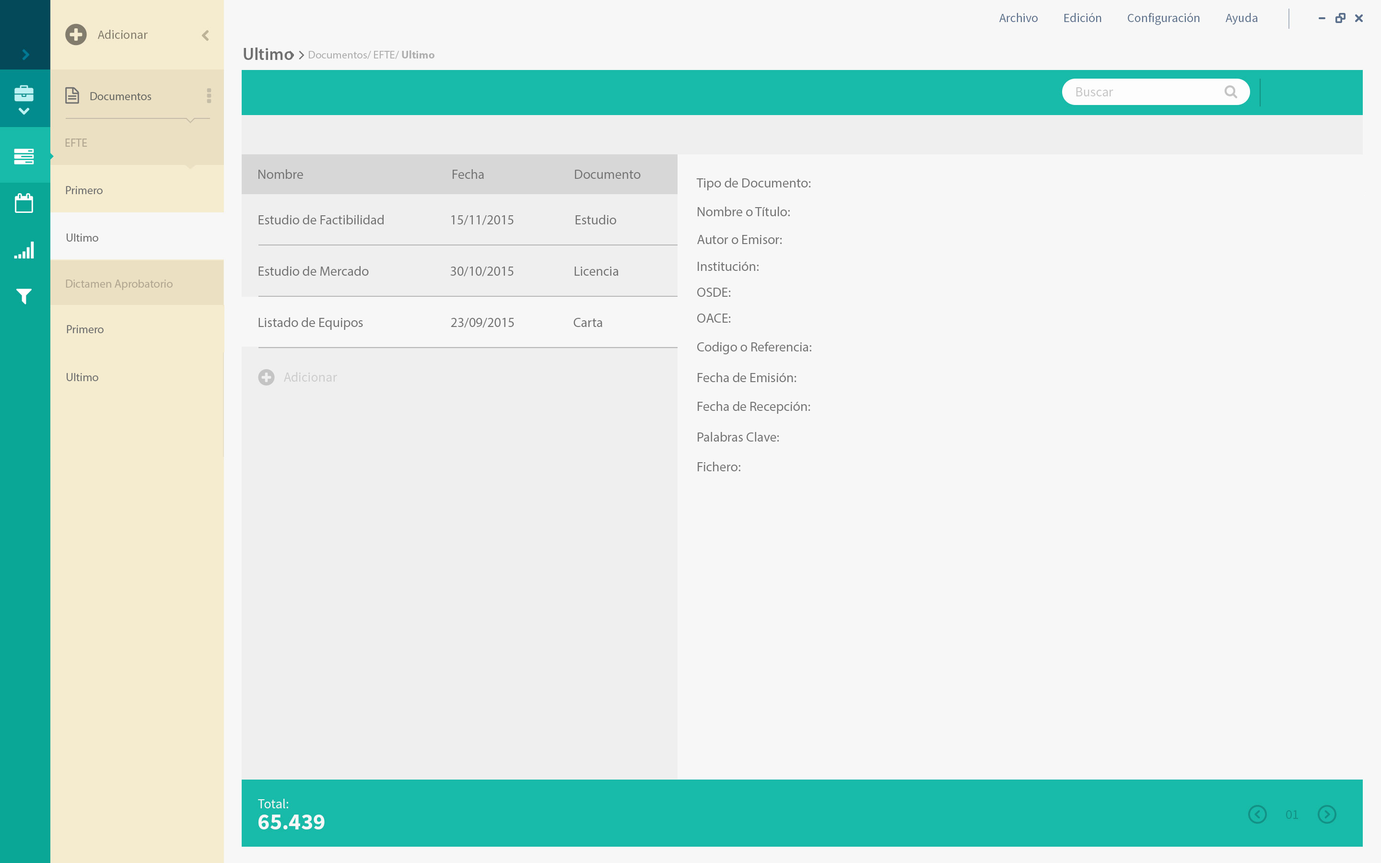
<style>
.page{position:relative;width:1381px;height:863px;background:#f7f7f7}
.page>*{position:absolute;margin:0}
.t1{font:17.3px "MyriadPro-Semibold";color:#707070}
.t2{font:11px "MyriadPro-Regular";color:#afafaf}
.t3{font:11px "MyriadPro-Bold";color:#afafaf}
.t4{font:11.5px "MyriadPro-Regular";color:#6a6b66}
.t5{font:11.5px "MyriadPro-Regular";color:#b2a791}
.t6{font:13.4px "MyriadPro-Regular";color:#757575}
.t7{font:11.5px "MyriadPro-Regular";color:#707070}
.t8{font:13.4px "MyriadPro-Regular";color:#747474}
</style>
<div class="page">
<p class="t1" style="left:244px;top:47px;width:49px;height:13px">Ultimo</p>
<p class="t2" style="left:309px;top:50px;width:126px;height:9px">Documentos/ EFTE/ <span class="t3">Ultimo</span></p>
<p class="t4" style="left:90px;top:92px;width:62px;height:8px">Documentos</p>
<p class="t5" style="left:65px;top:139px;width:22px;height:8px">EFTE</p>
<p class="t6" style="left:259px;top:169px;width:44px;height:10px">Nombre</p>
<p class="t6" style="left:453px;top:169px;width:31px;height:10px">Fecha</p>
<p class="t6" style="left:575px;top:170px;width:66px;height:9px">Documento</p>
<p class="t6" style="left:696px;top:178px;width:115px;height:12px">Tipo de Documento:</p>
<p class="t7" style="left:66px;top:186px;width:37px;height:8px">Primero</p>
<p class="t6" style="left:698px;top:207px;width:92px;height:9px">Nombre o Título:</p>
<p class="t8" style="left:259px;top:215px;width:125px;height:9px">Estudio de Factibilidad</p>
<p class="t8" style="left:451px;top:215px;width:63px;height:10px">15/11/2015</p>
<p class="t8" style="left:576px;top:215px;width:40px;height:9px">Estudio</p>
<p class="t7" style="left:67px;top:234px;width:31px;height:8px">Ultimo</p>
<p class="t6" style="left:697px;top:235px;width:85px;height:9px">Autor o Emisor:</p>
<p class="t8" style="left:259px;top:266px;width:110px;height:10px">Estudio de Mercado</p>
<p class="t8" style="left:450px;top:267px;width:64px;height:10px">30/10/2015</p>
<p class="t8" style="left:575px;top:267px;width:44px;height:9px">Licencia</p>
<p class="t6" style="left:698px;top:262px;width:61px;height:9px">Institución:</p>
<p class="t5" style="left:66px;top:280px;width:107px;height:10px">Dictamen Aprobatorio</p>
<p class="t6" style="left:697px;top:288px;width:34px;height:9px">OSDE:</p>
<p class="t8" style="left:259px;top:317px;width:104px;height:13px">Listado de Equipos</p>
<p class="t8" style="left:451px;top:318px;width:63px;height:10px">23/09/2015</p>
<p class="t8" style="left:574px;top:318px;width:28px;height:9px">Carta</p>
<p class="t6" style="left:697px;top:314px;width:34px;height:9px">OACE:</p>
<p class="t7" style="left:67px;top:325px;width:37px;height:8px">Primero</p>
<p class="t6" style="left:697px;top:342px;width:114px;height:12px">Codigo o Referencia:</p>
<p class="t7" style="left:67px;top:373px;width:31px;height:8px">Ultimo</p>
<p class="t6" style="left:698px;top:373px;width:99px;height:9px">Fecha de Emisión:</p>
<p class="t6" style="left:698px;top:401px;width:113px;height:13px">Fecha de Recepción:</p>
<p class="t6" style="left:698px;top:432px;width:81px;height:10px">Palabras Clave:</p>
<p class="t6" style="left:698px;top:462px;width:43px;height:9px">Fichero:</p>
</div>
